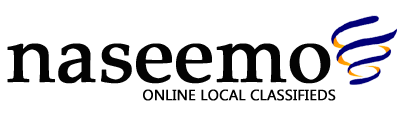
<style>
.page{position:relative;width:400px;height:120px;background:#ffffff}
.page>*{position:absolute;margin:0}
.t1{font:80px "PalatinoLinotype-Roman";color:#030303;font-weight:bold}
.t2{font:14.7px "LaoUI";color:#000000;font-weight:bold}
</style>
<div class="page">
<p class="t1" style="left:7px;top:43px;width:324px;height:41px">naseemo</p>
<p class="t2" style="left:143px;top:89px;width:193px;height:12px">ONLINE LOCAL CLASSIFIEDS</p>
</div>
